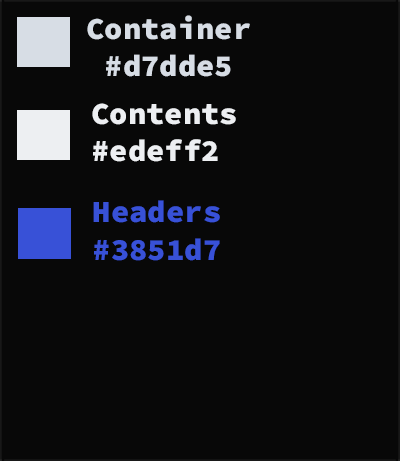
<style>
.page{position:relative;width:400px;height:461px;background:#080808}
.page>*{position:absolute;margin:0}
.t1{font:30.5px "SourceCodeRoman-Black";color:#d7dde5}
.t2{font:30.8px "SourceCodeRoman-Black";color:#edeff2}
.t3{font:30.9px "SourceCodeRoman-Black";color:#3851d7}
</style>
<div class="page">
<p class="t1" style="left:87px;top:15px;width:163px;height:62px;text-align:center">Container<br>#d7dde5</p>
<p class="t2" style="left:92px;top:103px;width:144px;height:59px">Contents<br>#edeff2</p>
<p class="t3" style="left:93px;top:200px;width:127px;height:61px">Headers<br>#3851d7</p>
</div>
